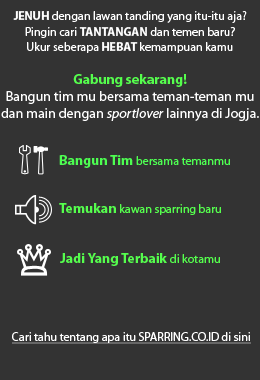
<style>
.page{position:relative;width:260px;height:380px;background:#333333}
.page>*{position:absolute;margin:0}
.t1{font:14px "MyriadPro-Regular";color:#ffffff}
.t2{font:12px "MyriadPro-Bold";color:#ffffff}
.t3{font:12px "MyriadPro-Regular";color:#ffffff}
.t4{font:14px "MyriadPro-Bold";color:#55fe4d}
.t5{font:14px "MyriadPro-It";color:#ffffff}
.t6{font:12px "MyriadPro-Regular";color:#4dfe51}
.t7{font:14px "MyriadPro-Bold";color:#4dfe51}
.t8{font:12px "MyriadPro-Regular";color:#55fe4d}
.t9{font:12px "MyriadPro-Regular";color:#ffffff;text-decoration:underline}
</style>
<div class="page">
<p class="t1" style="left:1px;top:11px;width:258px;height:110px;text-align:center"><span class="t2">JENUH</span><span class="t3"> dengan lawan tanding yang itu-itu aja? <br>Pingin cari </span><span class="t2">TANTANGAN</span><span class="t3"> dan temen baru? <br>Ukur seberapa </span><span class="t2">HEBAT</span><span class="t3"> kemampuan kamu<br><br></span><span class="t4">Gabung sekarang! <br></span>Bangun tim mu bersama teman-teman mu dan main dengan <span class="t5">sportlover</span> lainnya di Jogja.</p>
<p class="t6" style="left:59px;top:155px;width:171px;height:13px"><span class="t7">Bangun Tim </span>bersama temanmu</p>
<p class="t8" style="left:59px;top:203px;width:162px;height:12px"><span class="t4">Temukan </span>kawan sparring baru</p>
<p class="t4" style="left:60px;top:253px;width:160px;height:13px">Jadi Yang Terbaik <span class="t8">di kotamu</span></p>
<p class="t9" style="left:12px;top:332px;width:239px;height:12px">Cari tahu tentang apa itu SPARRING.CO.ID di sini</p>
</div>
